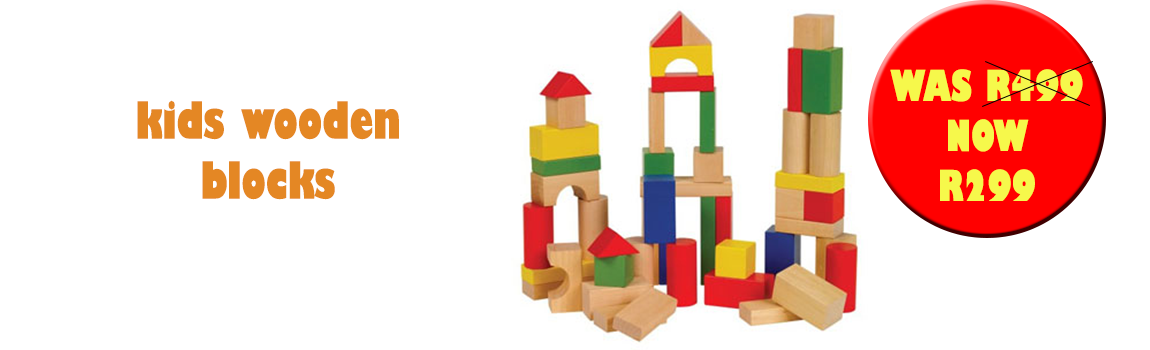
<style>
.page{position:relative;width:1150px;height:350px;background:#ffffff}
.page>*{position:absolute;margin:0}
.t1{font:41.7px "GillSans-UltraBoldCondensed";color:#f6f84b}
.t2{font:50px "GillSans-UltraBoldCondensed";color:#e48724}
</style>
<div class="page">
<p class="t1" style="left:890px;top:69px;width:193px;height:132px;text-align:center">WAS R499<br>NOW <br>R299</p>
<p class="t2" style="left:137px;top:100px;width:262px;height:100px;text-align:center">kids wooden blocks</p>
</div>
